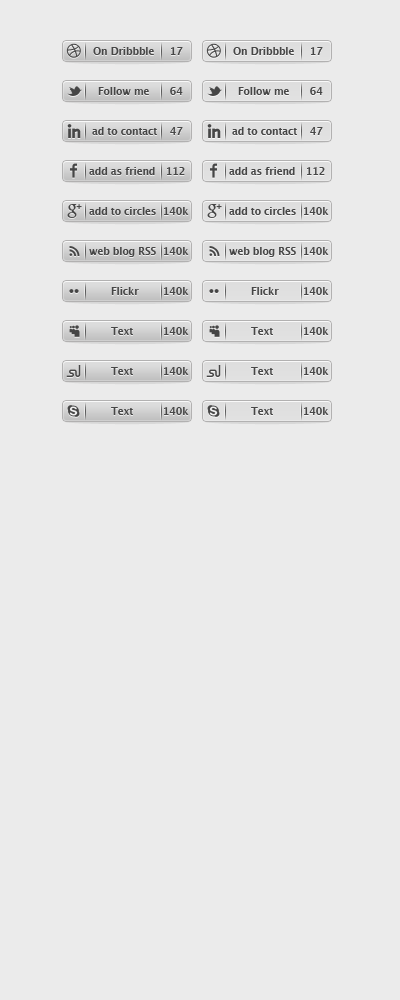
<style>
.page{position:relative;width:400px;height:1000px;background:#ebebeb}
.page>*{position:absolute;margin:0}
.t1{font:10px "LucidaGrande-Bold";letter-spacing:-0.015em;color:#464646}
</style>
<div class="page">
<p class="t1" style="left:93px;top:47px;width:61px;height:8px">On Dribbble</p>
<p class="t1" style="left:171px;top:47px;width:12px;height:8px">17</p>
<p class="t1" style="left:233px;top:47px;width:61px;height:8px">On Dribbble</p>
<p class="t1" style="left:311px;top:47px;width:12px;height:8px">17</p>
<p class="t1" style="left:98px;top:87px;width:51px;height:8px">Follow me</p>
<p class="t1" style="left:170px;top:87px;width:13px;height:8px">64</p>
<p class="t1" style="left:238px;top:87px;width:51px;height:8px">Follow me</p>
<p class="t1" style="left:310px;top:87px;width:13px;height:8px">64</p>
<p class="t1" style="left:92px;top:127px;width:65px;height:8px">ad to contact</p>
<p class="t1" style="left:170px;top:127px;width:13px;height:8px">47</p>
<p class="t1" style="left:232px;top:127px;width:65px;height:8px">ad to contact</p>
<p class="t1" style="left:310px;top:127px;width:13px;height:8px">47</p>
<p class="t1" style="left:89px;top:167px;width:66px;height:8px">add as friend</p>
<p class="t1" style="left:167px;top:167px;width:18px;height:8px">112</p>
<p class="t1" style="left:229px;top:167px;width:66px;height:8px">add as friend</p>
<p class="t1" style="left:307px;top:167px;width:18px;height:8px">112</p>
<p class="t1" style="left:89px;top:207px;width:67px;height:8px">add to circles</p>
<p class="t1" style="left:164px;top:207px;width:25px;height:8px">140k</p>
<p class="t1" style="left:229px;top:207px;width:67px;height:8px">add to circles</p>
<p class="t1" style="left:304px;top:207px;width:25px;height:8px">140k</p>
<p class="t1" style="left:89px;top:247px;width:67px;height:10px">web blog RSS</p>
<p class="t1" style="left:164px;top:247px;width:25px;height:8px">140k</p>
<p class="t1" style="left:229px;top:247px;width:67px;height:10px">web blog RSS</p>
<p class="t1" style="left:304px;top:247px;width:25px;height:8px">140k</p>
<p class="t1" style="left:111px;top:287px;width:28px;height:8px">Flickr</p>
<p class="t1" style="left:164px;top:287px;width:25px;height:8px">140k</p>
<p class="t1" style="left:251px;top:287px;width:28px;height:8px">Flickr</p>
<p class="t1" style="left:304px;top:287px;width:25px;height:8px">140k</p>
<p class="t1" style="left:111px;top:327px;width:22px;height:8px">Text</p>
<p class="t1" style="left:164px;top:327px;width:25px;height:8px">140k</p>
<p class="t1" style="left:251px;top:327px;width:22px;height:8px">Text</p>
<p class="t1" style="left:304px;top:327px;width:25px;height:8px">140k</p>
<p class="t1" style="left:111px;top:367px;width:22px;height:8px">Text</p>
<p class="t1" style="left:164px;top:367px;width:25px;height:8px">140k</p>
<p class="t1" style="left:251px;top:367px;width:22px;height:8px">Text</p>
<p class="t1" style="left:304px;top:367px;width:25px;height:8px">140k</p>
<p class="t1" style="left:111px;top:407px;width:22px;height:8px">Text</p>
<p class="t1" style="left:164px;top:407px;width:25px;height:8px">140k</p>
<p class="t1" style="left:251px;top:407px;width:22px;height:8px">Text</p>
<p class="t1" style="left:304px;top:407px;width:25px;height:8px">140k</p>
</div>
